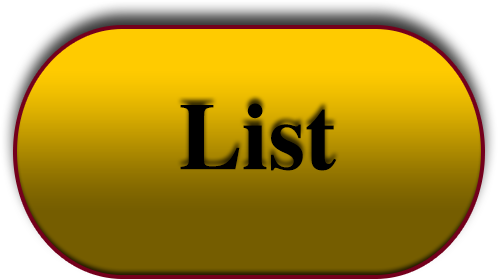
<style>
.page{position:relative;width:498px;height:280px}
.page>*{position:absolute;margin:0}
.t1{font:95px "STIXGeneral-Bold";color:#000000}
</style>
<div class="page">
<p class="t1" style="left:180px;top:103px;width:157px;height:68px">List</p>
</div>
